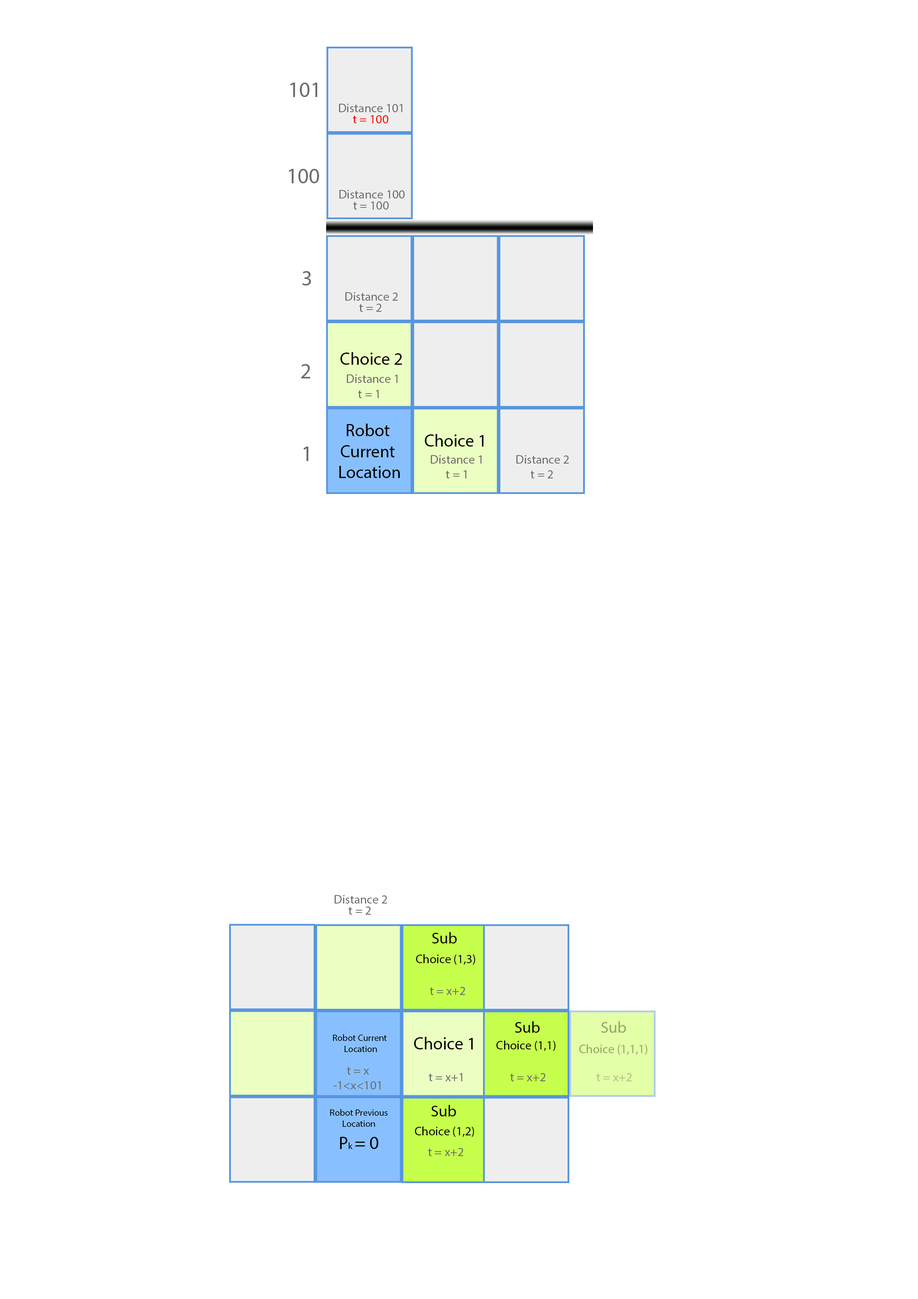
<style>
.page{position:relative;width:918px;height:1299px;background:#ffffff}
.page>*{position:absolute;margin:0}
.t1{font:21.6px "MyriadPro-Regular";color:#6c6c6c}
.t2{font:12.3px "MyriadPro-Regular";color:#6c6c6c}
.t3{font:12.3px "MyriadPro-Regular";color:#ff0000}
.t4{font:17.5px "MyriadPro-Regular";color:#000000}
.t5{font:15.8px "MyriadPro-Regular";color:#000000}
.t6{font:12.3px "MyriadPro-Regular";color:#000000}
.t7{font:15.8px "MyriadPro-Regular";color:#92a56a}
.t8{font:9.3px "MyriadPro-Regular";color:#000000}
.t9{font:12.3px "MyriadPro-Regular";color:#92a56a}
.t10{font:12.3px "MyriadPro-Regular";color:#afc08c}
.t11{font:18.5px "MyriadPro-Regular";color:#000000}
</style>
<div class="page">
<p class="t1" style="left:290px;top:83px;width:27px;height:14px">101</p>
<p class="t2" style="left:339px;top:104px;width:63px;height:8px">Distance 101</p>
<p class="t3" style="left:353px;top:115px;width:35px;height:8px">t = 100</p>
<p class="t1" style="left:289px;top:169px;width:30px;height:14px">100</p>
<p class="t2" style="left:339px;top:190px;width:66px;height:8px">Distance 100</p>
<p class="t2" style="left:353px;top:201px;width:36px;height:9px">t = 100</p>
<p class="t1" style="left:302px;top:271px;width:9px;height:14px">3</p>
<p class="t2" style="left:345px;top:292px;width:53px;height:9px">Distance 2</p>
<p class="t2" style="left:359px;top:304px;width:23px;height:8px">t = 2</p>
<p class="t4" style="left:340px;top:352px;width:62px;height:13px">Choice 2</p>
<p class="t1" style="left:301px;top:364px;width:9px;height:14px">2</p>
<p class="t2" style="left:347px;top:374px;width:51px;height:9px">Distance 1</p>
<p class="t2" style="left:358px;top:390px;width:21px;height:8px">t = 1</p>
<p class="t4" style="left:339px;top:424px;width:61px;height:54px;text-align:center">Robot <br>Current <br>Location</p>
<p class="t4" style="left:425px;top:434px;width:59px;height:12px">Choice 1</p>
<p class="t1" style="left:304px;top:446px;width:4px;height:15px">1</p>
<p class="t1" style="left:304px;top:446px;width:4px;height:15px">1</p>
<p class="t2" style="left:431px;top:455px;width:51px;height:9px">Distance 1</p>
<p class="t2" style="left:516px;top:455px;width:53px;height:9px">Distance 2</p>
<p class="t2" style="left:446px;top:470px;width:20px;height:8px">t = 1</p>
<p class="t2" style="left:531px;top:470px;width:22px;height:8px">t = 2</p>
<p class="t2" style="left:335px;top:895px;width:52px;height:8px">Distance 2</p>
<p class="t2" style="left:348px;top:906px;width:23px;height:8px">t = 2</p>
<p class="t5" style="left:432px;top:932px;width:25px;height:11px">Sub</p>
<p class="t6" style="left:416px;top:954px;width:59px;height:10px">Choice (1,3)</p>
<p class="t2" style="left:430px;top:987px;width:35px;height:8px">t = x+2</p>
<p class="t5" style="left:515px;top:1021px;width:25px;height:12px">Sub</p>
<p class="t7" style="left:601px;top:1021px;width:25px;height:12px">Sub</p>
<p class="t8" style="left:333px;top:1034px;width:54px;height:18px;text-align:center">Robot Current <br>Location</p>
<p class="t4" style="left:414px;top:1037px;width:59px;height:12px">Choice 1</p>
<p class="t6" style="left:496px;top:1040px;width:60px;height:11px">Choice (1,1)</p>
<p class="t9" style="left:579px;top:1044px;width:69px;height:10px">Choice (1,1,1)</p>
<p class="t2" style="left:334px;top:1067px;width:47px;height:22px;text-align:center">t = x<br>-1&lt;x&lt;101</p>
<p class="t2" style="left:510px;top:1073px;width:36px;height:8px">t = x+2</p>
<p class="t10" style="left:596px;top:1073px;width:36px;height:8px">t = x+2</p>
<p class="t8" style="left:330px;top:1109px;width:58px;height:40px;text-align:center">Robot Previous<br>Location<br><span class="t4">P</span>k <span class="t11">= 0</span></p>
<p class="t5" style="left:431px;top:1105px;width:25px;height:11px">Sub</p>
<p class="t6" style="left:415px;top:1126px;width:59px;height:11px">Choice (1,2)</p>
<p class="t2" style="left:428px;top:1148px;width:36px;height:8px">t = x+2</p>
</div>
